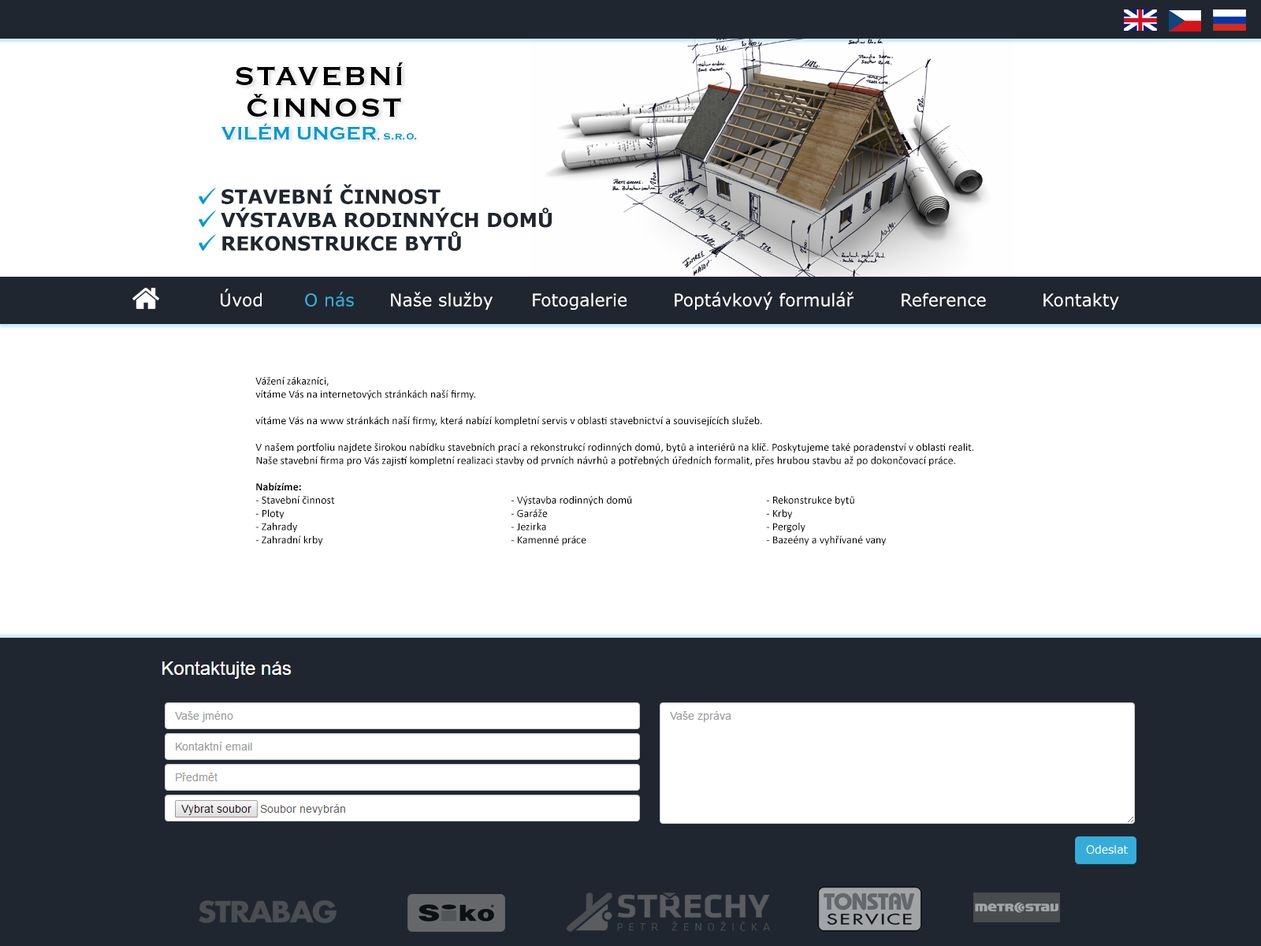
<style>
.page{position:relative;width:1261px;height:946px;background:#ffffff}
.page>*{position:absolute;margin:0}
.t1{font:19.5px "Verdana-Bold";color:#20262f}
.t2{font:17.3px "Verdana";color:#ffffff}
.t3{font:17.3px "Verdana";color:#35addb}
.t4{font:11px "Calibri";color:#010101}
.t5{font:11px "Calibri-Bold";color:#010101}
</style>
<div class="page">
<p class="t1" style="left:221px;top:184px;width:331px;height:67px">STAVEBNÍ ČINNOST<br>VÝSTAVBA RODINNÝCH DOMŮ<br>REKONSTRUKCE BYTŮ</p>
<p class="t2" style="left:221px;top:288px;width:898px;height:22px">Úvod  <span class="t3">O nás</span>  Naše služby  Fotogalerie  Poptávkový formulář  Reference  Kontakty</p>
<p class="t4" style="left:255px;top:377px;width:719px;height:168px">Vážení zákazníci,<br>vítáme Vás na internetových stránkách naší firmy.<br><br>vítáme Vás na www stránkách naší firmy, která nabízí kompletní servis v oblasti stavebnictví a souvisejících služeb.<br><br>V našem portfoliu najdete širokou nabídku stavebních prací a rekonstrukcí rodinných domů, bytů a interiérů na klíč. Poskytujeme také poradenství v oblasti realit. <br>Naše stavební firma pro Vás zajistí kompletní realizaci stavby od prvních návrhů a potřebných úředních formalit, přes hrubou stavbu až po dokončovací práce.<br><br><span class="t5">Nabízíme:<br></span>- Stavební činnost       - Výstavba rodinných domů     - Rekonstrukce bytů<br>- Ploty        - Garáže        - Krby<br>- Zahrady        - Jezirka        - Pergoly<br>- Zahradní krby       - Kamenné práce       - Bazeény a vyhřívané vany</p>
</div>
